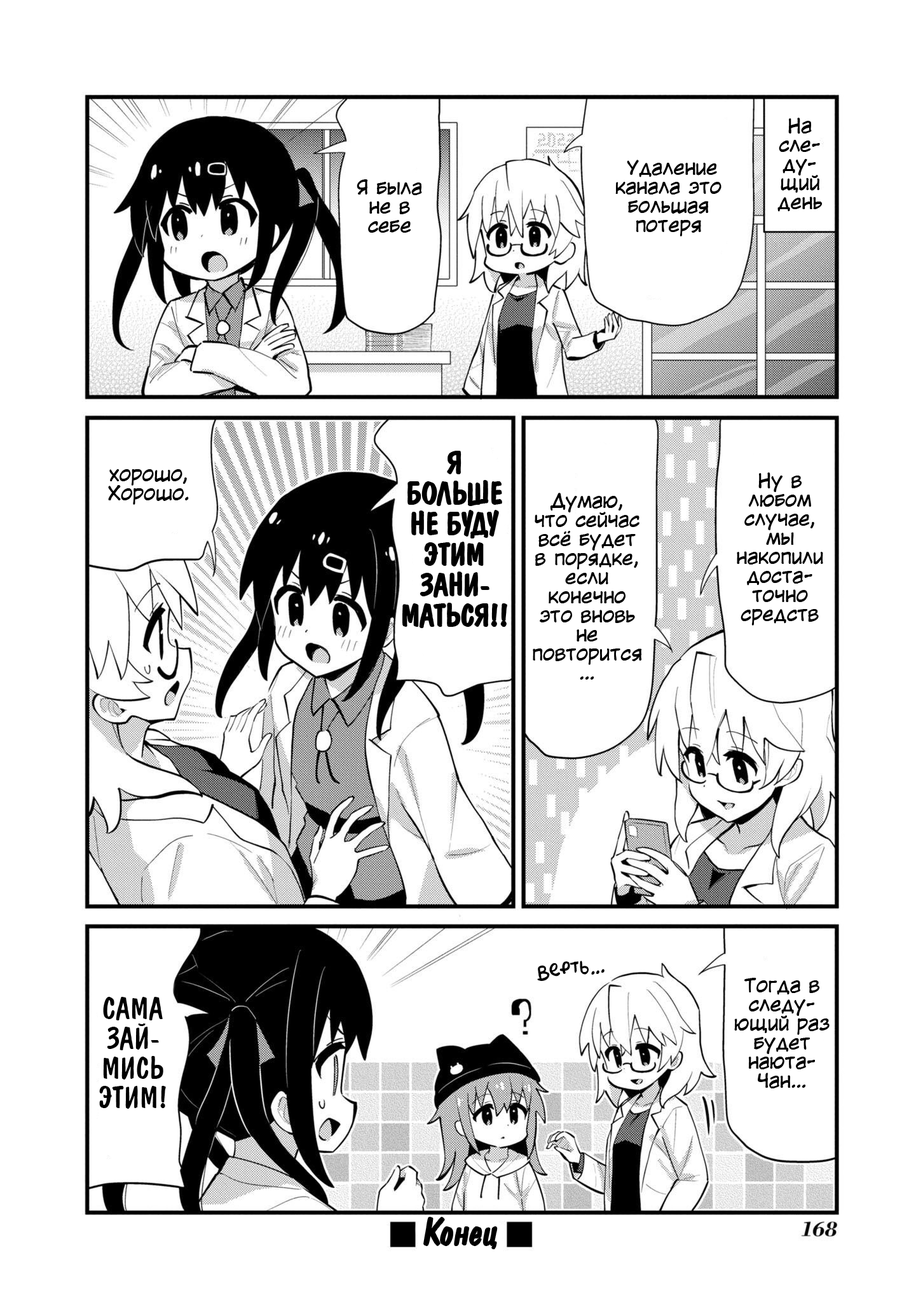
<style>
.page{position:relative;width:916px;height:1302px;background:#ffffff}
.page>*{position:absolute;margin:0}
.t1{font:19.1px/19.1px "KuraiVoice2";color:#000000}
.t2{font:30.5px/30.5px "ADomIno";color:#000000}
.t3{font:19.1px "AkbarPlain";color:#000000}
.t4{font:29.9px/29.9px "ADomIno";color:#000000}
.t5{font:38.1px "ADomInoItalic";color:#000000}
</style>
<div class="page">
<p class="t1" style="left:777px;top:118px;width:46px;height:94px;text-align:center">На<br>сле-<br>ду-<br>щий<br>день</p>
<p class="t1" style="left:615px;top:160px;width:106px;height:76px;text-align:center">Удаление канала это большая потеря</p>
<p class="t1" style="left:357px;top:179px;width:65px;height:54px;text-align:center">Я была не в себе</p>
<p class="t2" style="left:403px;top:451px;width:104px;height:176px;text-align:center">Я<br>БОЛЬШЕ НЕ БУДУ ЭТИМ ЗАНИ-<br>МАТЬСЯ!!</p>
<p class="t1" style="left:108px;top:469px;width:81px;height:36px;text-align:center">хорошо,<br>Хорошо.</p>
<p class="t1" style="left:737px;top:472px;width:86px;height:153px;text-align:center">Ну в<br>любом<br>случае,<br>мы<br>накопили доста-<br>точно средств</p>
<p class="t1" style="left:533px;top:493px;width:109px;height:187px;text-align:center">Думаю, что сейчас всё будет в порядке, если конечно это вновь не повторится…</p>
<p class="t3" style="left:537px;top:960px;width:68px;height:21px;rotate:-8deg">Верть...</p>
<p class="t1" style="left:734px;top:978px;width:96px;height:110px;text-align:center">Тогда в следу-<br>ющий раз будет наюта-<br>Чан…</p>
<p class="t4" style="left:99px;top:997px;width:67px;height:112px;text-align:center">САМА<br>ЗАЙ-<br>МИСЬ<br>ЭТИМ!</p>
<p class="t5" style="left:424px;top:1217px;width:73px;height:31px">Конец</p>
</div>
